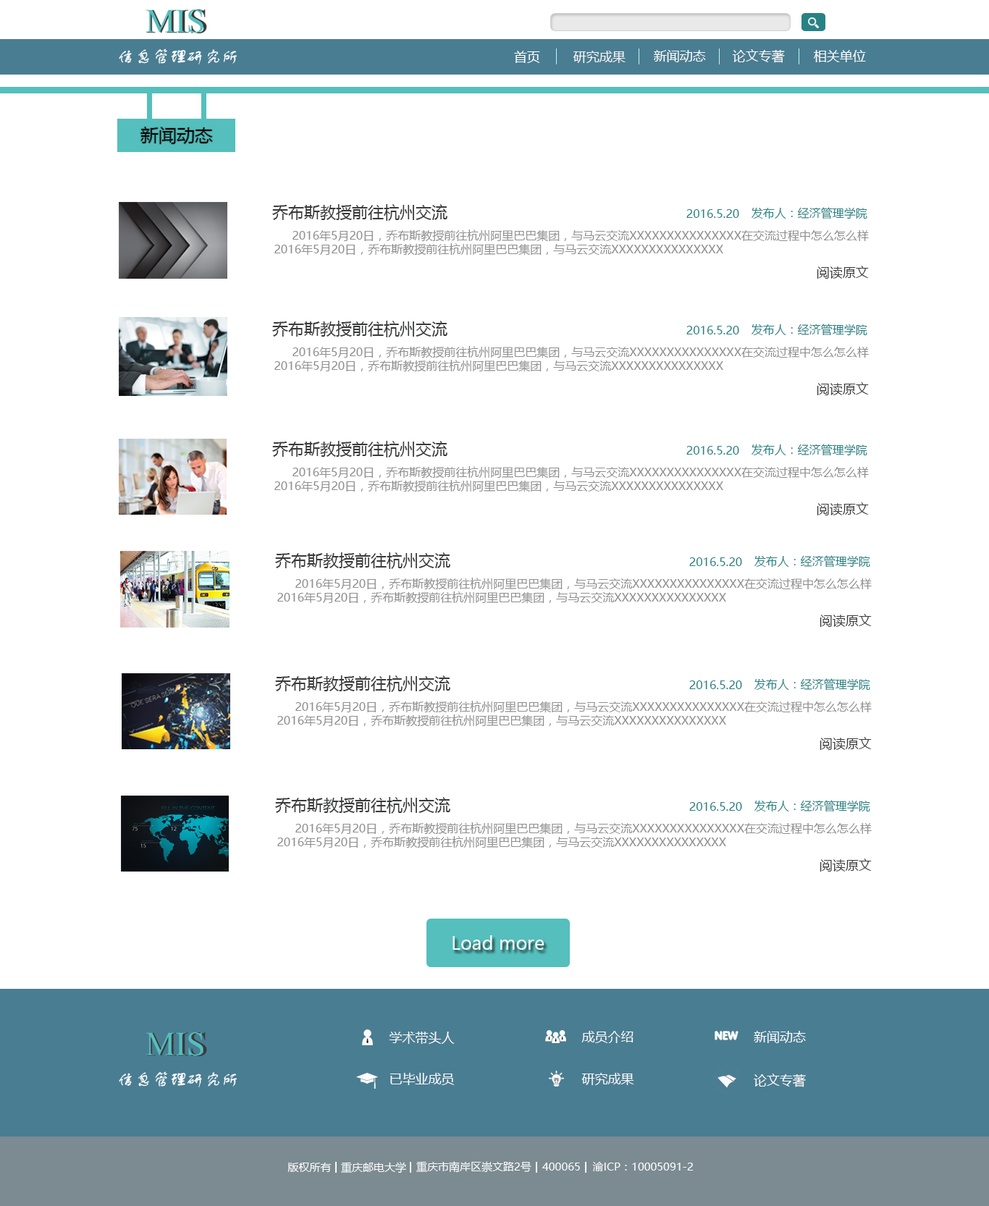
<style>
.page{position:relative;width:989px;height:1206px;background:#ffffff}
.page>*{position:absolute;margin:0}
.t1{font:13px "MicrosoftYaHei";color:#fefefe}
.t2{font:13px "MicrosoftYaHei";color:#f8f4f4}
.t3{font:13px "MicrosoftYaHei";color:#fefafa}
.t4{font:13px "MicrosoftYaHei";color:#fcf9f9}
.t5{font:13px "MicrosoftYaHei";color:#fdfcfc}
.t6{font:18.1px "MicrosoftYaHei";color:#060606}
.t7{font:15.9px "MicrosoftYaHei";color:#393a3a}
.t8{font:11.6px "MicrosoftYaHei";color:#288285}
.t9{font:11.6px "MicrosoftYaHei";color:#908e8e}
.t10{font:14.5px "MicrosoftYaHei";color:#908e8e}
.t11{font:13px "MicrosoftYaHei";color:#393a3a}
.t12{font:18.1px "MicrosoftYaHei";color:#f9fafc}
.t13{font:13px "MicrosoftYaHei";color:#fbf8f8}
.t14{font:13px "MicrosoftYaHei";color:#fcfafa}
.t15{font:13px "MicrosoftYaHei";color:#fdf8f8}
.t16{font:10.9px "MicrosoftYaHei";color:#f9fafc}
</style>
<div class="page">
<p class="t1" style="left:514px;top:51px;width:26px;height:12px">首页</p>
<p class="t2" style="left:573px;top:51px;width:52px;height:12px">研究成果</p>
<p class="t3" style="left:654px;top:50px;width:52px;height:12px">新闻动态</p>
<p class="t4" style="left:732px;top:49px;width:53px;height:14px">论文专著</p>
<p class="t5" style="left:814px;top:50px;width:52px;height:12px">相关单位</p>
<p class="t6" style="left:140px;top:127px;width:73px;height:17px">新闻动态</p>
<p class="t7" style="left:272px;top:204px;width:175px;height:17px">乔布斯教授前往杭州交流</p>
<p class="t8" style="left:686px;top:209px;width:53px;height:9px">2016.5.20</p>
<p class="t8" style="left:751px;top:207px;width:116px;height:12px">发布人：经济管理学院</p>
<p class="t9" style="left:292px;top:229px;width:577px;height:13px"><span class="t10">   </span> 2016年5月20日，乔布斯教授前往杭州阿里巴巴集团，与马云交流XXXXXXXXXXXXXXX在交流过程中怎么怎么样</p>
<p class="t9" style="left:274px;top:243px;width:449px;height:13px"><span class="t10">   </span> 2016年5月20日，乔布斯教授前往杭州阿里巴巴集团，与马云交流XXXXXXXXXXXXXXX</p>
<p class="t11" style="left:817px;top:266px;width:52px;height:13px">阅读原文</p>
<p class="t7" style="left:272px;top:321px;width:175px;height:16px">乔布斯教授前往杭州交流</p>
<p class="t8" style="left:686px;top:326px;width:53px;height:8px">2016.5.20</p>
<p class="t8" style="left:751px;top:324px;width:116px;height:12px">发布人：经济管理学院</p>
<p class="t9" style="left:292px;top:346px;width:577px;height:12px"><span class="t10">   </span> 2016年5月20日，乔布斯教授前往杭州阿里巴巴集团，与马云交流XXXXXXXXXXXXXXX在交流过程中怎么怎么样</p>
<p class="t9" style="left:274px;top:360px;width:449px;height:12px"><span class="t10">   </span> 2016年5月20日，乔布斯教授前往杭州阿里巴巴集团，与马云交流XXXXXXXXXXXXXXX</p>
<p class="t11" style="left:817px;top:382px;width:52px;height:13px">阅读原文</p>
<p class="t7" style="left:272px;top:441px;width:175px;height:16px">乔布斯教授前往杭州交流</p>
<p class="t8" style="left:686px;top:446px;width:53px;height:9px">2016.5.20</p>
<p class="t8" style="left:751px;top:444px;width:116px;height:12px">发布人：经济管理学院</p>
<p class="t9" style="left:292px;top:466px;width:577px;height:12px"><span class="t10">   </span> 2016年5月20日，乔布斯教授前往杭州阿里巴巴集团，与马云交流XXXXXXXXXXXXXXX在交流过程中怎么怎么样</p>
<p class="t9" style="left:274px;top:480px;width:449px;height:12px"><span class="t10">   </span> 2016年5月20日，乔布斯教授前往杭州阿里巴巴集团，与马云交流XXXXXXXXXXXXXXX</p>
<p class="t11" style="left:817px;top:502px;width:52px;height:13px">阅读原文</p>
<p class="t7" style="left:275px;top:552px;width:175px;height:17px">乔布斯教授前往杭州交流</p>
<p class="t8" style="left:689px;top:557px;width:53px;height:9px">2016.5.20</p>
<p class="t8" style="left:754px;top:555px;width:116px;height:13px">发布人：经济管理学院</p>
<p class="t9" style="left:295px;top:578px;width:577px;height:12px"><span class="t10">   </span> 2016年5月20日，乔布斯教授前往杭州阿里巴巴集团，与马云交流XXXXXXXXXXXXXXX在交流过程中怎么怎么样</p>
<p class="t9" style="left:277px;top:591px;width:449px;height:13px"><span class="t10">   </span> 2016年5月20日，乔布斯教授前往杭州阿里巴巴集团，与马云交流XXXXXXXXXXXXXXX</p>
<p class="t11" style="left:819px;top:614px;width:53px;height:13px">阅读原文</p>
<p class="t7" style="left:275px;top:675px;width:175px;height:17px">乔布斯教授前往杭州交流</p>
<p class="t8" style="left:689px;top:680px;width:53px;height:9px">2016.5.20</p>
<p class="t8" style="left:754px;top:678px;width:116px;height:13px">发布人：经济管理学院</p>
<p class="t9" style="left:295px;top:701px;width:577px;height:12px"><span class="t10">   </span> 2016年5月20日，乔布斯教授前往杭州阿里巴巴集团，与马云交流XXXXXXXXXXXXXXX在交流过程中怎么怎么样</p>
<p class="t9" style="left:277px;top:714px;width:449px;height:13px"><span class="t10">   </span> 2016年5月20日，乔布斯教授前往杭州阿里巴巴集团，与马云交流XXXXXXXXXXXXXXX</p>
<p class="t11" style="left:819px;top:737px;width:53px;height:13px">阅读原文</p>
<p class="t7" style="left:275px;top:797px;width:175px;height:17px">乔布斯教授前往杭州交流</p>
<p class="t8" style="left:689px;top:802px;width:53px;height:9px">2016.5.20</p>
<p class="t8" style="left:754px;top:800px;width:116px;height:12px">发布人：经济管理学院</p>
<p class="t9" style="left:295px;top:822px;width:577px;height:13px"><span class="t10">   </span> 2016年5月20日，乔布斯教授前往杭州阿里巴巴集团，与马云交流XXXXXXXXXXXXXXX在交流过程中怎么怎么样</p>
<p class="t9" style="left:277px;top:836px;width:449px;height:12px"><span class="t10">   </span> 2016年5月20日，乔布斯教授前往杭州阿里巴巴集团，与马云交流XXXXXXXXXXXXXXX</p>
<p class="t11" style="left:819px;top:858px;width:53px;height:14px">阅读原文</p>
<p class="t12" style="left:452px;top:935px;width:92px;height:15px">Load more</p>
<p class="t13" style="left:389px;top:1031px;width:66px;height:13px">学术带头人</p>
<p class="t13" style="left:581px;top:1031px;width:52px;height:12px">成员介绍</p>
<p class="t14" style="left:754px;top:1031px;width:52px;height:12px">新闻动态</p>
<p class="t13" style="left:389px;top:1073px;width:66px;height:12px">已毕业成员</p>
<p class="t13" style="left:581px;top:1073px;width:53px;height:12px">研究成果</p>
<p class="t15" style="left:754px;top:1073px;width:52px;height:14px">论文专著</p>
<p class="t16" style="left:287px;top:1163px;width:45px;height:9px">版权所有</p>
<p class="t16" style="left:341px;top:1162px;width:65px;height:11px">重庆邮电大学</p>
<p class="t16" style="left:416px;top:1161px;width:115px;height:12px">重庆市南岸区崇文路2号</p>
<p class="t16" style="left:542px;top:1163px;width:38px;height:7px">400065</p>
<p class="t16" style="left:592px;top:1162px;width:101px;height:9px">渝ICP：10005091-2</p>
</div>
